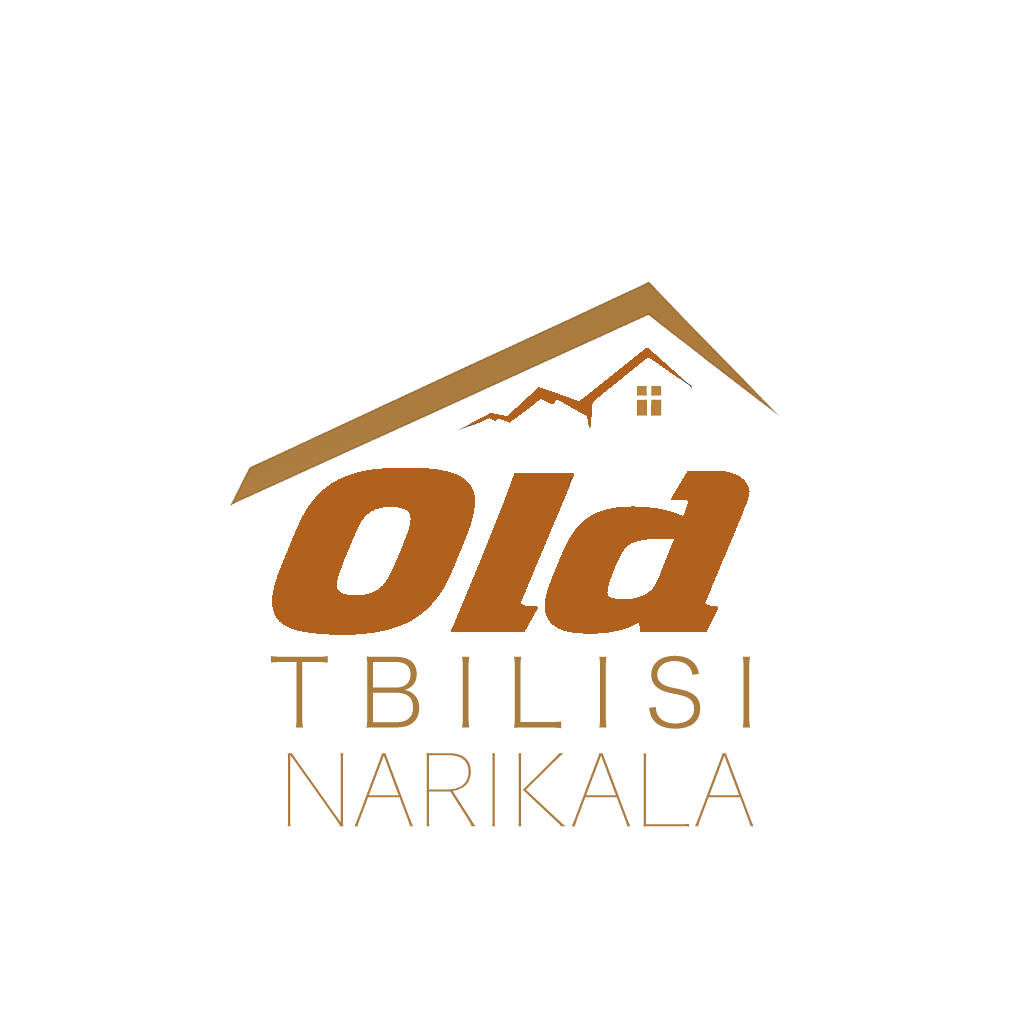
<style>
.page{position:relative;width:1024px;height:1024px;background:#ffffff}
.page>*{position:absolute;margin:0}
.t1{font:94.2px "HiraginoSans-W2";letter-spacing:0.315em;color:#aa7c3e;text-transform:uppercase}
.t2{font:98.1px "HiraginoSans-W0";color:#ac7c42;text-transform:uppercase}
</style>
<div class="page">
<p class="t1" style="left:271px;top:655px;width:479px;height:74px">tbilisi</p>
<p class="t2" style="left:287px;top:753px;width:467px;height:74px">Narikala</p>
</div>
